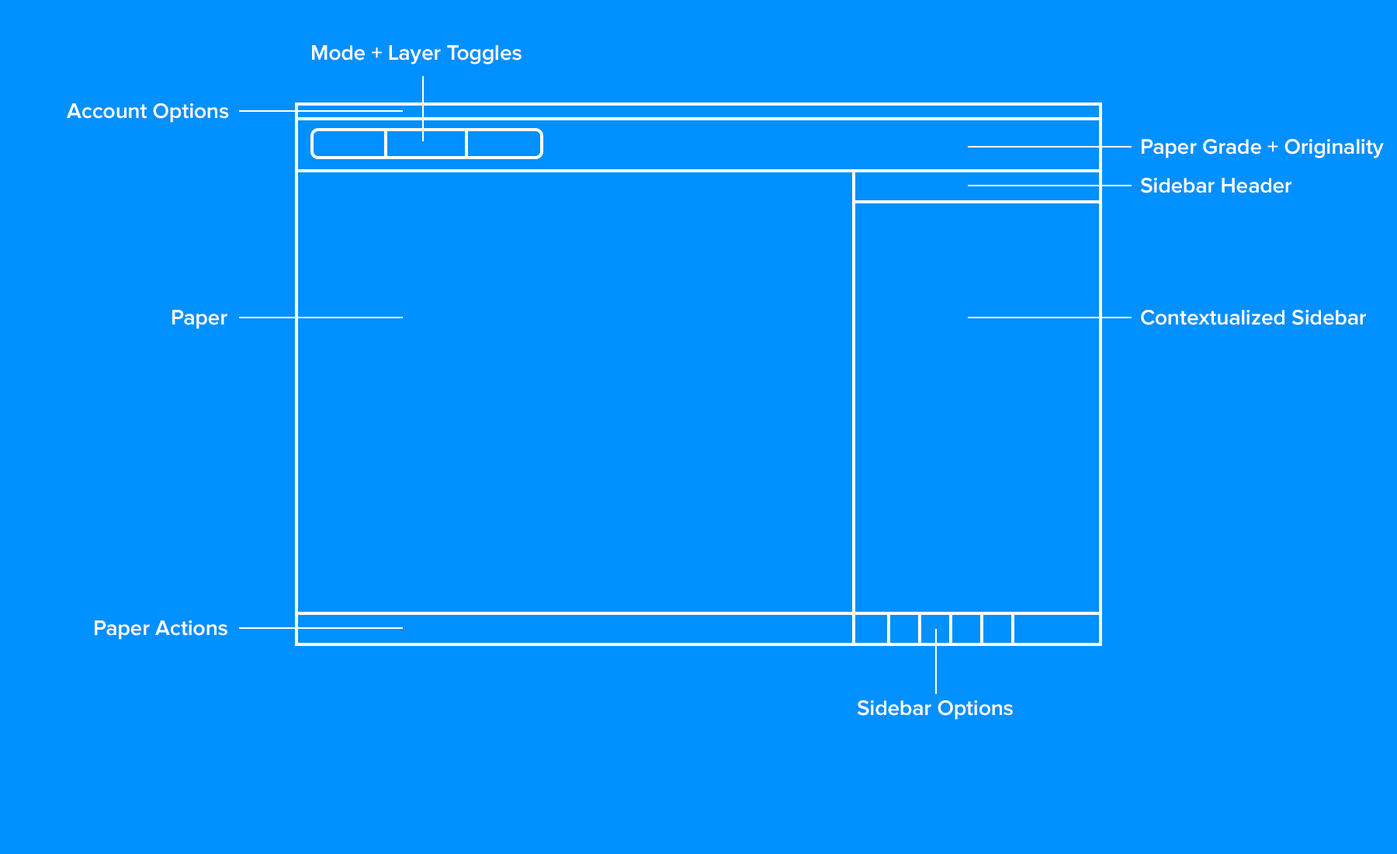
<style>
.page{position:relative;width:1397px;height:854px;background:#0090ff}
.page>*{position:absolute;margin:0}
.t1{font:21.7px "ProximaNova-Semibold";color:#ffffff}
</style>
<div class="page">
<p class="t1" style="left:312px;top:45px;width:209px;height:19px">Mode + Layer Toggles</p>
<p class="t1" style="left:67px;top:103px;width:162px;height:20px">Account Options</p>
<p class="t1" style="left:1142px;top:139px;width:242px;height:19px">Paper Grade + Originality</p>
<p class="t1" style="left:1141px;top:178px;width:150px;height:15px">Sidebar Header</p>
<p class="t1" style="left:172px;top:310px;width:55px;height:19px">Paper</p>
<p class="t1" style="left:1141px;top:310px;width:225px;height:15px">Contextualized Sidebar</p>
<p class="t1" style="left:95px;top:620px;width:132px;height:19px">Paper Actions</p>
<p class="t1" style="left:858px;top:700px;width:155px;height:19px">Sidebar Options</p>
</div>
